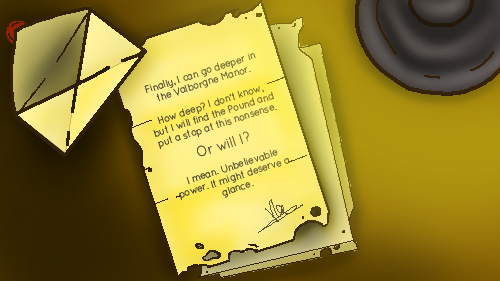
<style>
.page{position:relative;width:500px;height:281px}
.page>*{position:absolute;margin:0}
.t1{font:10px/11px "QuicksandLight-Regular";letter-spacing:-0.025em;color:#605c38;font-weight:bold;scale:0.9 1}
.t2{font:14px/11px "QuicksandLight-Regular";letter-spacing:-0.025em;color:#605c38;font-weight:bold;scale:0.9 1}
</style>
<div class="page">
<p class="t1" style="left:144px;top:53px;width:146px;height:148px;text-align:center;rotate:-18deg">Finally, I can go deeper in the Valborgne Manor. <br><br>How deep? I don’t know, but I will find the Pound and put a stop at this nonsense.<br> <br><span class="t2">Or will I?<br></span><br> I mean. Unbelievable power. It might deserve a glance.</p>
</div>
